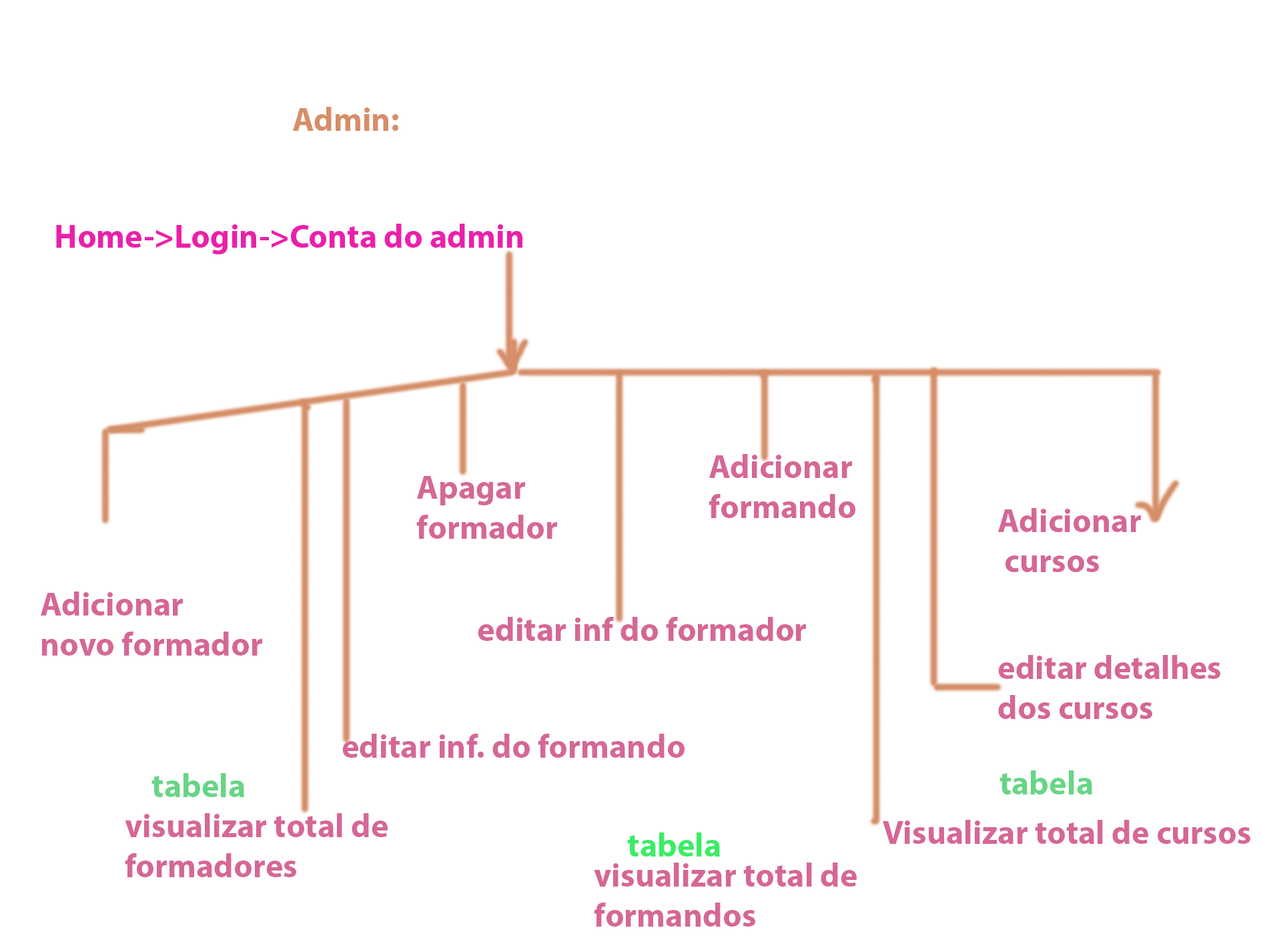
<style>
.page{position:relative;width:1261px;height:946px;background:#ffffff}
.page>*{position:absolute;margin:0}
.t1{font:33.4px "MyriadPro-Bold";color:#d58e67}
.t2{font:33.4px "MyriadPro-Bold";color:#d56796}
.t3{font:33.4px "MyriadPro-Bold";color:#67d586}
.t4{font:33.4px "MyriadPro-Bold";color:#3bed65}
</style>
<div class="page">
<p class="t1" style="left:293px;top:107px;width:105px;height:24px">Admin:</p>
<p class="t2" style="left:709px;top:454px;width:146px;height:64px">Adicionar<br>formando</p>
<p class="t2" style="left:416px;top:476px;width:141px;height:62px">Apagar<br>formador</p>
<p class="t2" style="left:998px;top:508px;width:143px;height:64px">Adicionar<br> cursos</p>
<p class="t2" style="left:41px;top:591px;width:221px;height:64px">Adicionar<br>novo formador</p>
<p class="t2" style="left:998px;top:655px;width:222px;height:64px">editar detalhes<br>dos cursos</p>
<p class="t2" style="left:342px;top:733px;width:343px;height:24px">editar inf. do formando</p>
<p class="t3" style="left:151px;top:773px;width:93px;height:24px">tabela</p>
<p class="t3" style="left:1000px;top:770px;width:92px;height:24px">tabela</p>
<p class="t2" style="left:125px;top:813px;width:263px;height:64px">visualizar total de <br>formadores</p>
<p class="t2" style="left:883px;top:819px;width:367px;height:24px">Visualizar total de cursos</p>
<p class="t4" style="left:627px;top:832px;width:93px;height:24px">tabela</p>
<p class="t2" style="left:594px;top:862px;width:263px;height:64px">visualizar total de <br>formandos</p>
</div>
